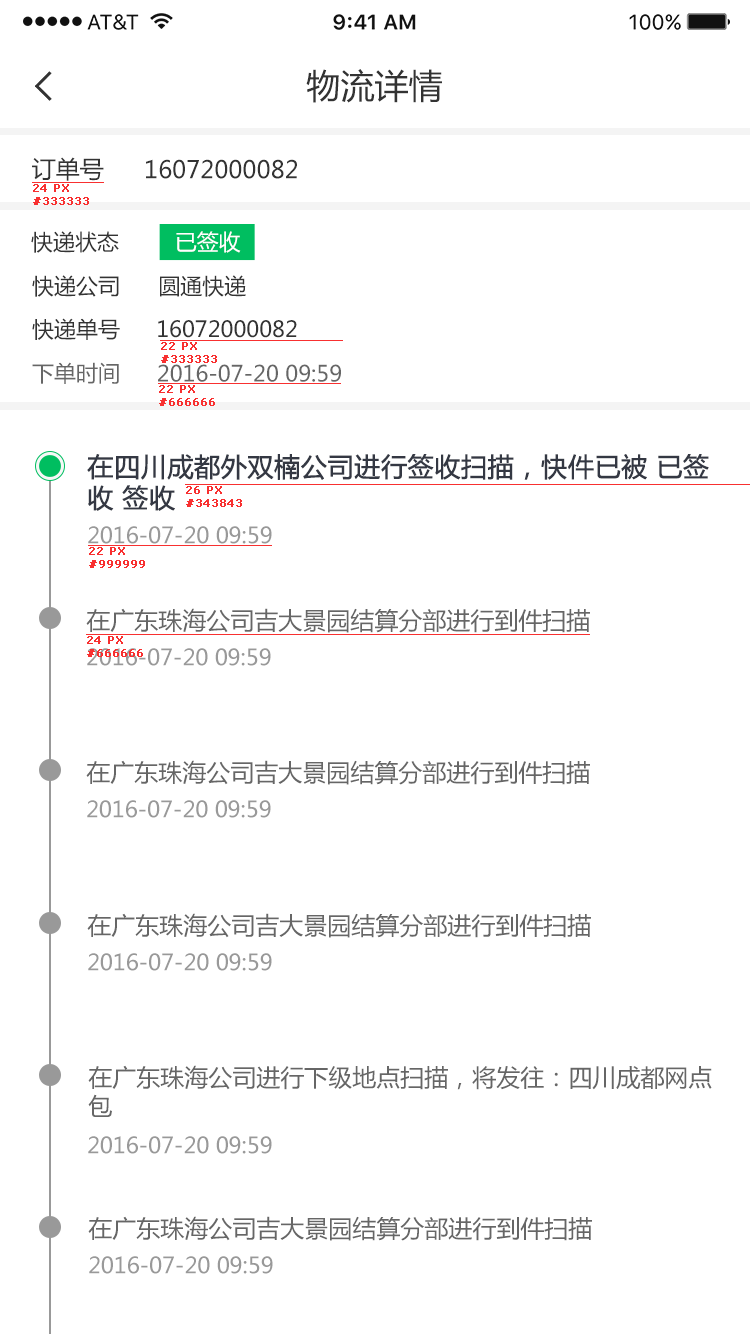
<style>
.page{position:relative;width:750px;height:1334px;background:#ffffff}
.page>*{position:absolute;margin:0}
.t1{font:34px "MicrosoftYaHei";color:#333333}
.t2{font:24px "MicrosoftYaHei";color:#333333}
.t3{font:11px "Verdana";color:#f83030;font-weight:bold}
.t4{font:22px "MicrosoftYaHei";color:#333333}
.t5{font:22px "MicrosoftYaHei";color:#ffffff}
.t6{font:22px "MicrosoftYaHei";color:#666666}
.t7{font:22px "MicrosoftYaHei";letter-spacing:-0.06em;color:#666666}
.t8{font:26px "MicrosoftYaHei";color:#343843;font-weight:bold}
.t9{font:22px "MicrosoftYaHei";color:#999999}
.t10{font:24px "MicrosoftYaHei";color:#666666}
</style>
<div class="page">
<p class="t1" style="left:306px;top:69px;width:136px;height:34px">物流详情</p>
<p class="t2" style="left:32px;top:157px;width:72px;height:24px">订单号</p>
<p class="t2" style="left:146px;top:159px;width:151px;height:20px">16072000082</p>
<p class="t3" style="left:33px;top:184px;width:56px;height:21px">24 PX<br>#333333</p>
<p class="t4" style="left:31px;top:231px;width:210px;height:22px">快递状态         <span class="t5">已签收</span></p>
<p class="t4" style="left:32px;top:275px;width:214px;height:22px">快递公司      圆通快递</p>
<p class="t4" style="left:32px;top:318px;width:265px;height:22px">快递单号      16072000082</p>
<p class="t3" style="left:161px;top:342px;width:56px;height:21px">22 PX<br>#333333</p>
<p class="t6" style="left:32px;top:362px;width:87px;height:22px">下单时间</p>
<p class="t6" style="left:158px;top:364px;width:183px;height:18px"><span class="t7"> </span>2016-07-20 09:59</p>
<p class="t3" style="left:159px;top:385px;width:56px;height:21px">22 PX<br>#666666</p>
<p class="t8" style="left:87px;top:454px;width:622px;height:57px">在四川成都外双楠公司进行签收扫描，快件已被 已签<br>收 签收</p>
<p class="t3" style="left:186px;top:486px;width:56px;height:21px">26 PX<br>#343843</p>
<p class="t9" style="left:88px;top:526px;width:184px;height:18px">2016-07-20 09:59</p>
<p class="t3" style="left:89px;top:547px;width:56px;height:21px">22 PX<br>#999999</p>
<p class="t10" style="left:86px;top:608px;width:504px;height:25px">在广东珠海公司吉大景园结算分部进行到件扫描</p>
<p class="t3" style="left:87px;top:636px;width:56px;height:21px">24 PX<br>#666666</p>
<p class="t9" style="left:87px;top:648px;width:184px;height:18px">2016-07-20 09:59</p>
<p class="t10" style="left:86px;top:760px;width:504px;height:25px">在广东珠海公司吉大景园结算分部进行到件扫描</p>
<p class="t9" style="left:87px;top:800px;width:184px;height:18px">2016-07-20 09:59</p>
<p class="t10" style="left:87px;top:913px;width:504px;height:25px">在广东珠海公司吉大景园结算分部进行到件扫描</p>
<p class="t9" style="left:88px;top:953px;width:184px;height:18px">2016-07-20 09:59</p>
<p class="t10" style="left:88px;top:1065px;width:624px;height:52px">在广东珠海公司进行下级地点扫描，将发往：四川成都网点<br>包</p>
<p class="t9" style="left:88px;top:1136px;width:184px;height:18px">2016-07-20 09:59</p>
<p class="t10" style="left:88px;top:1216px;width:504px;height:25px">在广东珠海公司吉大景园结算分部进行到件扫描</p>
<p class="t9" style="left:89px;top:1256px;width:184px;height:18px">2016-07-20 09:59</p>
</div>
